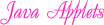
<style>
.page{position:relative;width:104px;height:25px;background:#ffffff}
.page>*{position:absolute;margin:0}
.t1{font:24px "UkrainianDecor";color:#fc24bc}
</style>
<div class="page">
<p class="t1" style="left:0px;top:0px;width:105px;height:25px">Java Applets</p>
</div>
